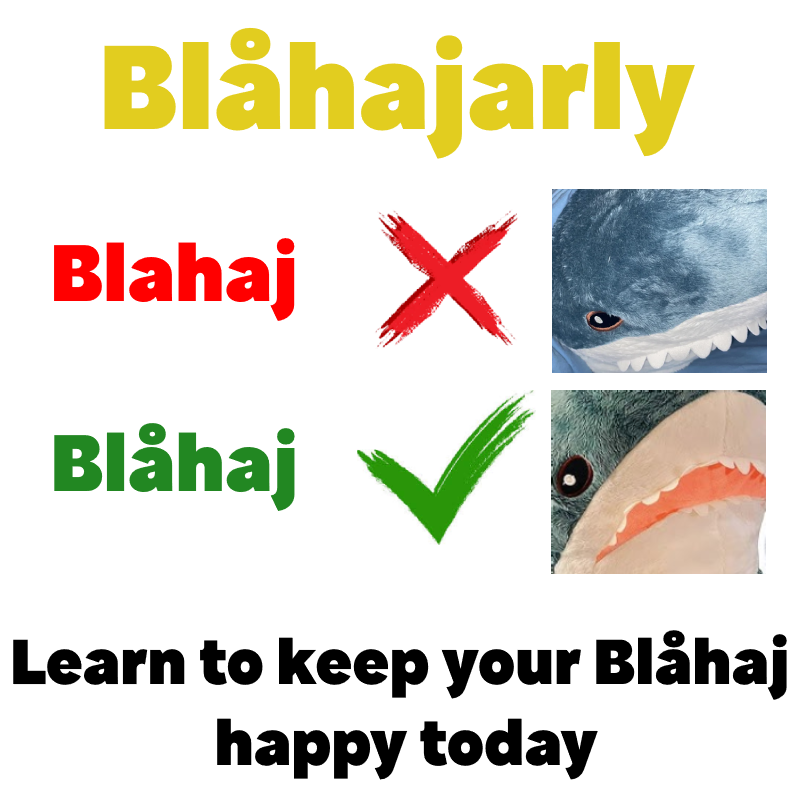
<style>
.page{position:relative;width:800px;height:800px;background:#ffffff}
.page>*{position:absolute;margin:0}
.t1{font:128px "ApfelGrotezk-Satt";color:#e2cd1f}
.t2{font:86px "ApfelGrotezk-Satt";color:#ff0000}
.t3{font:86px "ApfelGrotezk-Satt";color:#228722}
.t4{font:68.1px "ApfelGrotezk-Satt";color:#000000}
</style>
<div class="page">
<p class="t1" style="left:104px;top:27px;width:591px;height:132px">Blåhajarly</p>
<p class="t2" style="left:54px;top:238px;width:241px;height:83px">Blahaj</p>
<p class="t3" style="left:54px;top:423px;width:241px;height:88px">Blåhaj</p>
<p class="t4" style="left:13px;top:630px;width:774px;height:150px;text-align:center">Learn to keep your Blåhaj <br>happy today</p>
</div>
